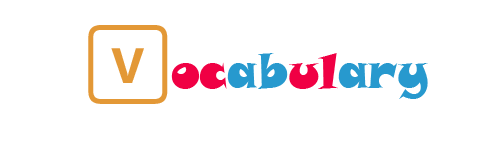
<style>
.page{position:relative;width:503px;height:161px;background:#ffffff}
.page>*{position:absolute;margin:0}
.t1{font:48px "SnapITC-Regular";color:#2799ce}
.t2{font:68px "SegoeKeycaps";color:#e39836}
.t3{font:48px "SnapITC-Regular";color:#f00044}
</style>
<div class="page">
<p class="t1" style="left:88px;top:25px;width:340px;height:79px"><span class="t2">V</span><span class="t3">oc</span>ab<span class="t3">ul</span>ary</p>
</div>
